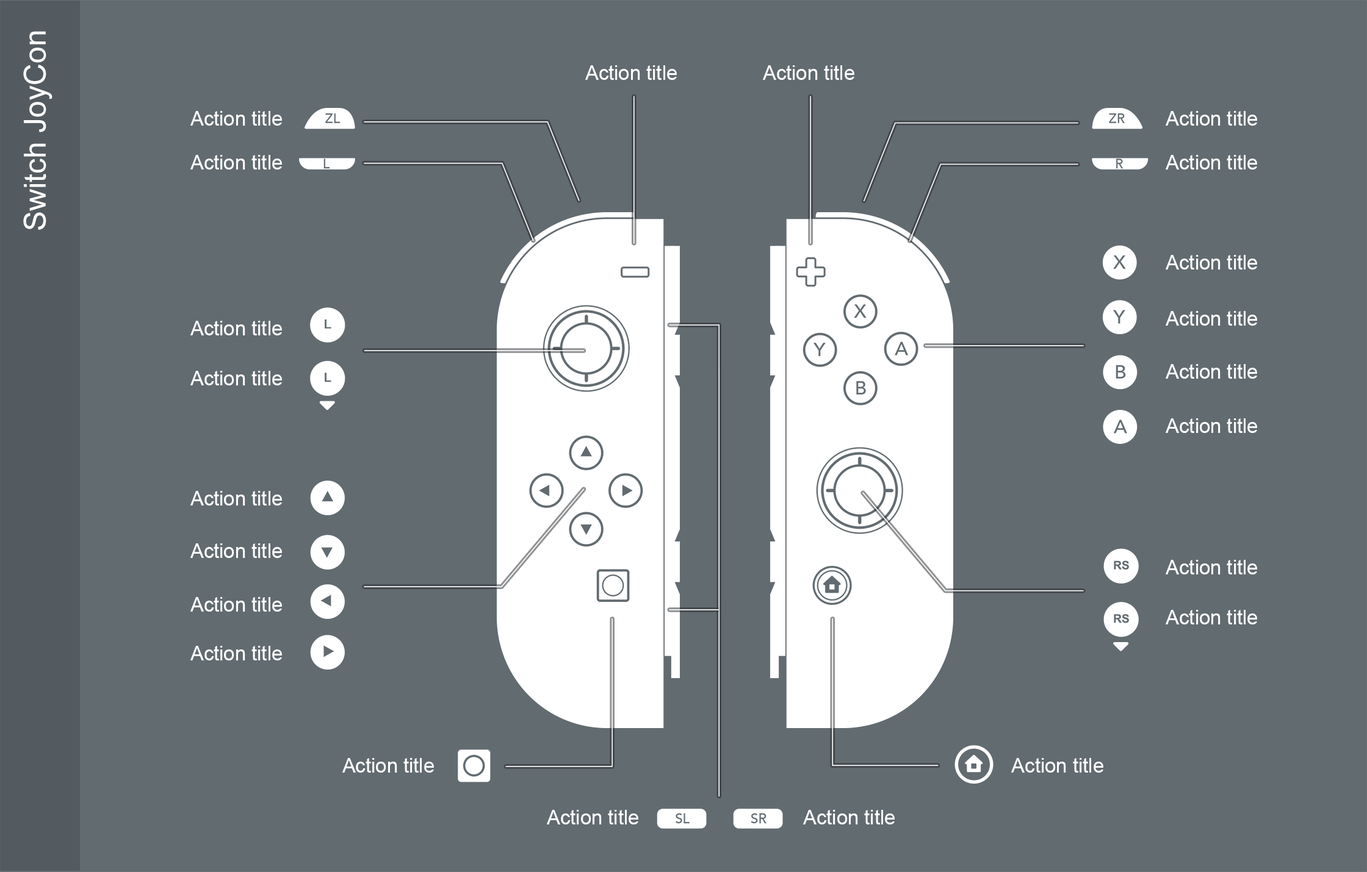
<style>
.page{position:relative;width:1367px;height:872px;background:#626b70}
.page>*{position:absolute;margin:0}
.t1{font:30.5px "ArialMT";color:#ffffff}
.t2{font:20px "ArialMT";color:#ffffff}
</style>
<div class="page">
<p class="t1" style="left:23px;top:31px;width:29px;height:199px;rotate:-90deg">Switch JoyCon</p>
<p class="t2" style="left:585px;top:65px;width:92px;height:15px">Action title</p>
<p class="t2" style="left:763px;top:65px;width:91px;height:15px">Action title</p>
<p class="t2" style="left:190px;top:111px;width:92px;height:15px">Action title</p>
<p class="t2" style="left:1165px;top:111px;width:92px;height:15px">Action title</p>
<p class="t2" style="left:190px;top:155px;width:92px;height:15px">Action title</p>
<p class="t2" style="left:1165px;top:155px;width:92px;height:15px">Action title</p>
<p class="t2" style="left:1165px;top:255px;width:92px;height:15px">Action title</p>
<p class="t2" style="left:1165px;top:311px;width:92px;height:15px">Action title</p>
<p class="t2" style="left:190px;top:321px;width:92px;height:15px">Action title</p>
<p class="t2" style="left:1165px;top:364px;width:92px;height:15px">Action title</p>
<p class="t2" style="left:190px;top:371px;width:92px;height:15px">Action title</p>
<p class="t2" style="left:1165px;top:419px;width:92px;height:14px">Action title</p>
<p class="t2" style="left:190px;top:491px;width:92px;height:15px">Action title</p>
<p class="t2" style="left:190px;top:544px;width:92px;height:14px">Action title</p>
<p class="t2" style="left:1165px;top:560px;width:92px;height:15px">Action title</p>
<p class="t2" style="left:190px;top:597px;width:92px;height:15px">Action title</p>
<p class="t2" style="left:1165px;top:610px;width:92px;height:15px">Action title</p>
<p class="t2" style="left:190px;top:646px;width:92px;height:15px">Action title</p>
<p class="t2" style="left:342px;top:758px;width:92px;height:15px">Action title</p>
<p class="t2" style="left:1011px;top:758px;width:92px;height:15px">Action title</p>
<p class="t2" style="left:547px;top:810px;width:91px;height:15px">Action title</p>
<p class="t2" style="left:803px;top:810px;width:91px;height:15px">Action title</p>
</div>
